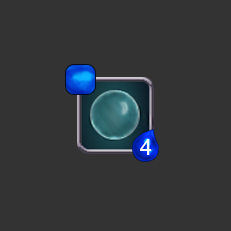
<style>
.page{position:relative;width:231px;height:231px;background:#333333}
.page>*{position:absolute;margin:0}
.t1{font:22px "ArialMT";color:#ffffff}
</style>
<div class="page">
<p class="t1" style="left:140px;top:139px;width:12px;height:16px">4</p>
</div>
